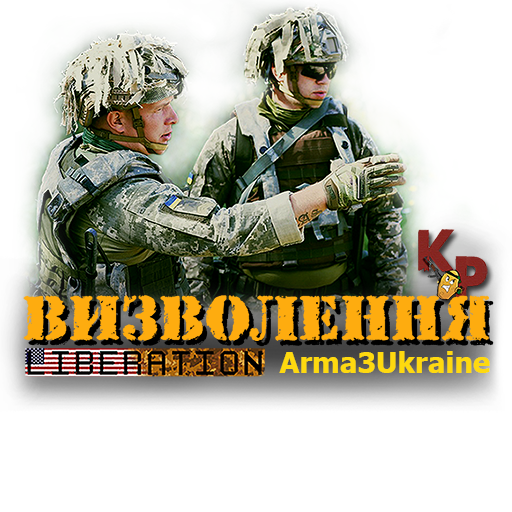
<style>
.page{position:relative;width:512px;height:512px;background:#ffffff}
.page>*{position:absolute;margin:0}
.t1{font:61.4px "AStamperRgBt";letter-spacing:0.01em}
.t2{font:28.8px "Tahoma-Bold";letter-spacing:0.01em;color:#fed90f}
</style>
<div class="page">
<p class="t1" style="left:28px;top:300px;width:466px;height:47px">ВИЗВОЛЕННЯ</p>
<p class="t2" style="left:279px;top:351px;width:211px;height:22px">Arma3Ukraine</p>
</div>
